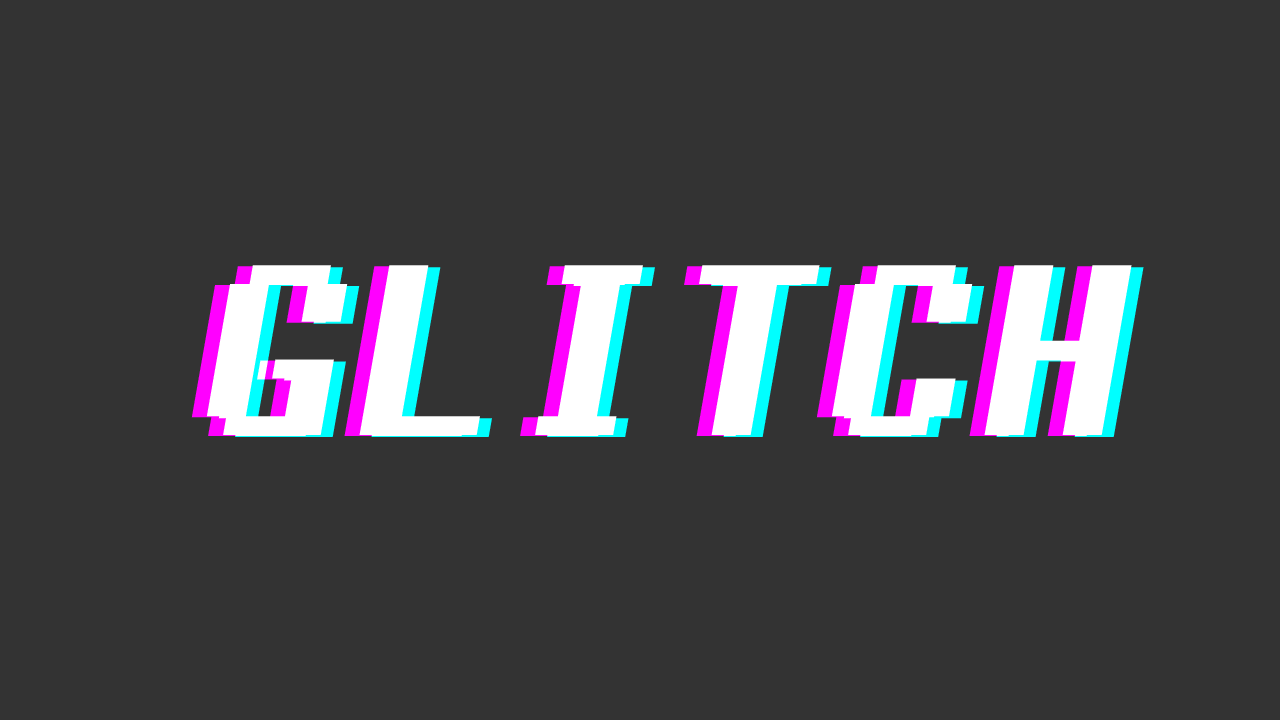
<style>
.page{position:relative;width:1280px;height:720px;background:#333333}
.page>*{position:absolute;margin:0}
.t1{font:245.2px "Fixedsys";color:#ffffff}
</style>
<div class="page">
<p class="t1" style="left:191px;top:266px;width:926px;height:170px">GLITCH</p>
<p class="t1" style="left:206px;top:265px;width:926px;height:170px">GLITCH</p>
<p class="t1" style="left:218px;top:267px;width:926px;height:170px">GLITCH</p>
</div>
